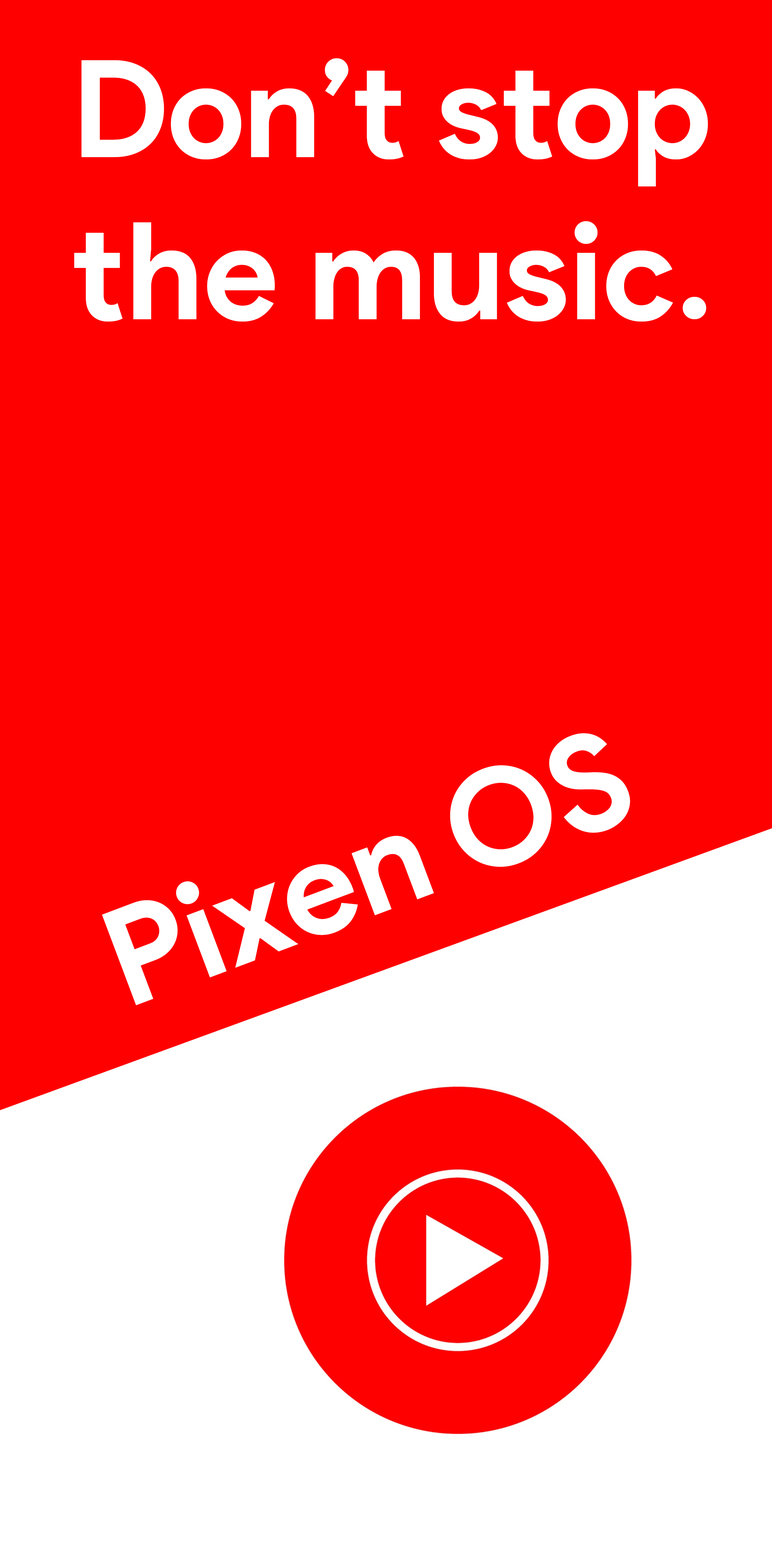
<style>
.page{position:relative;width:772px;height:1544px;background:#fe0000}
.page>*{position:absolute;margin:0}
.t1{font:135.1px "ProductSans-Bold";color:#ffffff}
</style>
<div class="page">
<p class="t1" style="left:74px;top:58px;width:634px;height:264px;text-align:center">Don’t stop the music.</p>
<p class="t1" style="left:102px;top:733px;width:528px;height:273px;rotate:-21deg">Pixen OS</p>
</div>
